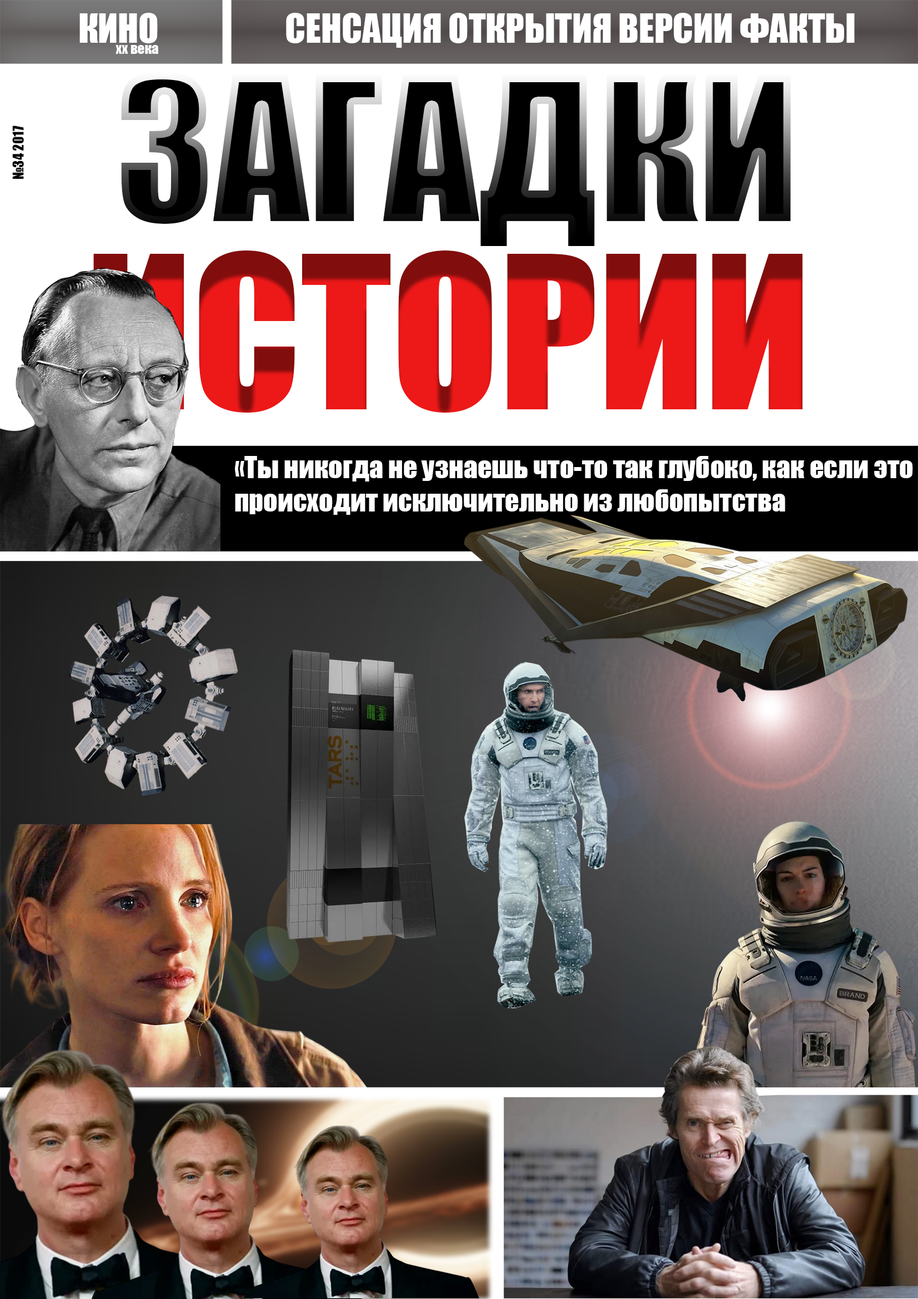
<style>
.page{position:relative;width:918px;height:1299px}
.page>*{position:absolute;margin:0}
.t1{font:37px "Impact";color:#ffffff}
.t2{font:13.9px "Impact";color:#ffffff}
.t3{font:185.1px "Impact";color:#000000}
.t4{font:13.9px "Impact";color:#000000}
.t5{font:196.8px "Impact";color:#ed1818}
.t6{font:27.8px "Impact";color:#ffffff}
</style>
<div class="page">
<p class="t1" style="left:79px;top:13px;width:79px;height:30px">КИНО<br><br>  xx века</p>
<p class="t1" style="left:286px;top:13px;width:569px;height:35px">СЕНСАЦИЯ ОТКРЫТИЯ ВЕРСИИ ФАКТЫ</p>
<p class="t2" style="left:116px;top:45px;width:42px;height:9px">xx века</p>
<p class="t3" style="left:121px;top:72px;width:670px;height:174px">ЗАГАДКИ</p>
<p class="t4" style="left:12px;top:126px;width:12px;height:53px;rotate:-90deg">№34 2017</p>
<p class="t5" style="left:93px;top:250px;width:709px;height:163px">ИСТОРИИ</p>
<p class="t6" style="left:235px;top:456px;width:678px;height:59px">«Ты никогда не узнаешь что-то так глубоко, как если это происходит исключительно из любопытства</p>
</div>
